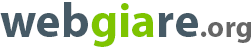
<style>
.page{position:relative;width:252px;height:49px;background:#ffffff}
.page>*{position:absolute;margin:0}
.t1{font:30px "MyriadPro-Bold";color:#666666}
.t2{font:48px "MyriadPro-Bold";color:#465a66}
.t3{font:48px "MyriadPro-Bold";color:#7ec400}
</style>
<div class="page">
<p class="t1" style="left:0px;top:2px;width:251px;height:45px"><span class="t2">web</span><span class="t3">gia</span><span class="t2">re</span>.org</p>
</div>
